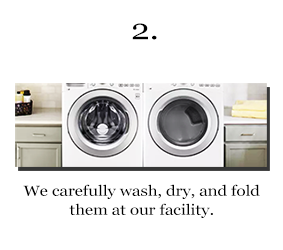
<style>
.page{position:relative;width:283px;height:250px;background:#ffffff}
.page>*{position:absolute;margin:0}
.t1{font:28.9px "Georgia";color:#000000;scale:1.16 1}
.t2{font:14.5px "Georgia";color:#000000;scale:1.16 1}
</style>
<div class="page">
<p class="t1" style="left:132px;top:23px;width:25px;height:17px">2.</p>
<p class="t2" style="left:23px;top:184px;width:237px;height:34px;text-align:center">We carefully wash, dry, and fold<br>them at our facility.</p>
</div>
